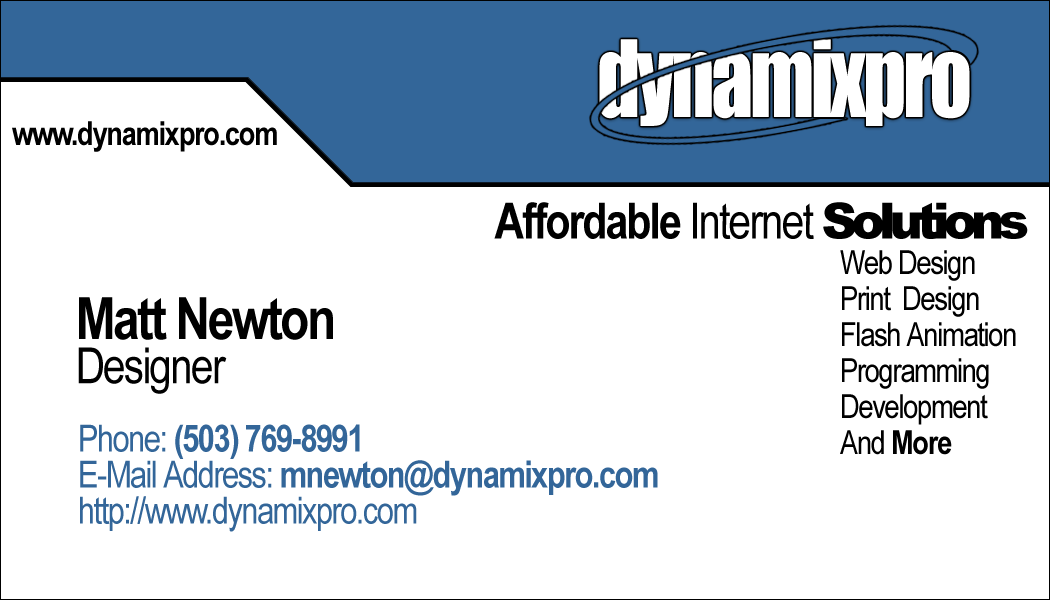
<style>
.page{position:relative;width:1050px;height:600px;background:#ffffff}
.page>*{position:absolute;margin:0}
.t1{font:98.5px "Impact";letter-spacing:-0.04em;color:#ffffff;scale:0.85 1}
.t2{font:33.3px "ArialNarrow-Bold";letter-spacing:-0.04em;color:#000000}
.t3{font:50px "ArialNarrow-Bold";letter-spacing:-0.04em;color:#000000}
.t4{font:50px "ArialNarrow";letter-spacing:-0.04em;color:#000000}
.t5{font:50px "Arial-Black";letter-spacing:-0.12em;color:#000000}
.t6{font:33.3px/36px "ArialNarrow";letter-spacing:-0.04em;color:#000000}
.t7{font:33.3px/44.4px "ArialNarrow";letter-spacing:-0.04em;color:#000000}
.t8{font:33.3px/36px "ArialNarrow-Bold";letter-spacing:-0.04em;color:#000000}
.t9{font:58.3px/44.4px "ArialNarrow-Bold";letter-spacing:-0.04em;color:#000000}
.t10{font:50px/44.4px "ArialNarrow";letter-spacing:-0.04em;color:#000000}
.t11{font:37.5px/36px "ArialNarrow";letter-spacing:-0.04em;color:#336699}
.t12{font:37.5px/36px "ArialNarrow-Bold";letter-spacing:-0.04em;color:#336699}
</style>
<div class="page">
<p class="t1" style="left:599px;top:39px;width:371px;height:87px">dynamixpro</p>
<p class="t2" style="left:12px;top:121px;width:265px;height:31px">www.dynamixpro.com</p>
<p class="t3" style="left:494px;top:202px;width:534px;height:37px">Affordable <span class="t4">Internet </span><span class="t5">Solutions</span></p>
<p class="t6" style="left:840px;top:250px;width:176px;height:205px"><span class="t7">Web Design<br></span>Print  Design<br>Flash Animation<br>Programming<br>Development<br>And <span class="t8">More</span></p>
<p class="t9" style="left:78px;top:297px;width:255px;height:97px">Matt Newton<br><span class="t10">Designer</span></p>
<p class="t11" style="left:80px;top:424px;width:578px;height:108px">Phone: <span class="t12">(503) 769-8991<br></span>E-Mail Address: <span class="t12">mnewton@dynamixpro.com<br></span>http://www.dynamixpro.com</p>
</div>
